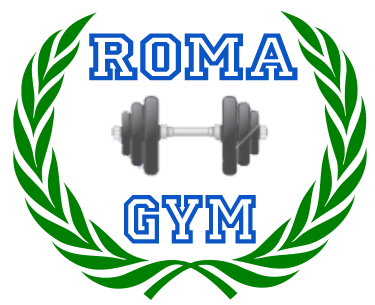
<style>
.page{position:relative;width:375px;height:305px;background:#ffffff}
.page>*{position:absolute;margin:0}
.t1{font:69.7px "PrincetownLET";letter-spacing:-0.01em;color:#0b55c4;scale:1.2 1}
.t2{font:72.2px "PrincetownLET";letter-spacing:-0.01em;color:#0b55c4}
</style>
<div class="page">
<p class="t1" style="left:89px;top:33px;width:209px;height:48px">ROMA</p>
<p class="t2" style="left:124px;top:195px;width:132px;height:49px">GYM</p>
</div>
